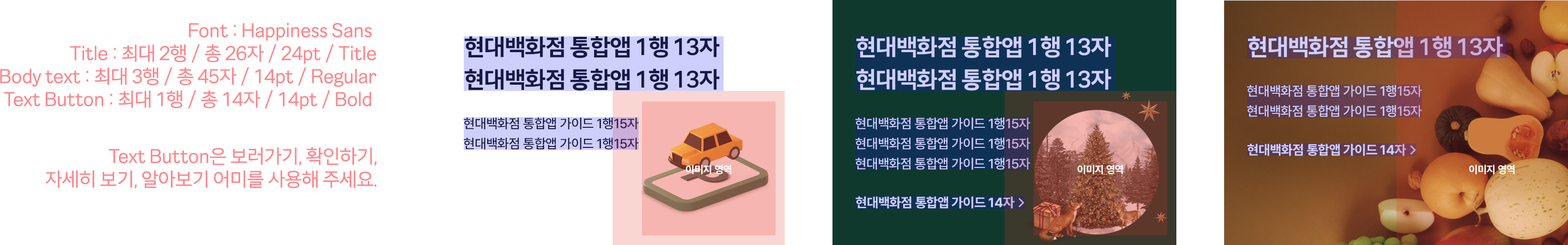
<style>
.page{position:relative;width:1568px;height:245px;background:#ffffff}
.page>*{position:absolute;margin:0}
.t1{font:19.1px/22.9px "Happiness-Sans-Regular";letter-spacing:-0.03em;color:#ff858b}
.t2{font:22.9px/32.5px "HappinessSansVF-Bold";letter-spacing:-0.035em;color:#161845}
.t3{font:22.9px/32.5px "HappinessSansVF-Bold";letter-spacing:-0.035em;color:#cfcffd}
.t4{font:22.9px "HappinessSansVF-Bold";letter-spacing:-0.035em}
.t5{font:13.4px/20.1px "Pretendard-Medium";letter-spacing:-0.02em;color:#cfcffd}
.t6{font:13.4px/20.1px "Pretendard-Medium";letter-spacing:-0.02em;color:#161845}
.t7{font:13.4px "Pretendard-Bold";letter-spacing:-0.02em;color:#cfcffd}
.t8{font:10.5px "Pretendard-Bold";letter-spacing:-0.02em;color:#ffffff}
</style>
<div class="page">
<p class="t1" style="left:0px;top:22px;width:376px;height:87px;text-align:right">Font : Happiness Sans <br>Title : 최대 2행 / 총 26자 / 24pt / Title<br>Body text : 최대 3행 / 총 45자 / 14pt / Regular<br>Text Button : 최대 1행 / 총 14자 / 14pt / Bold</p>
<p class="t2" style="left:465px;top:36px;width:255px;height:55px">현대백화점 통합앱 1행 13자<br>현대백화점 통합앱 1행 13자</p>
<p class="t3" style="left:856px;top:36px;width:255px;height:55px">현대백화점 통합앱 1행 13자<br>현대백화점 통합앱 1행 13자</p>
<p class="t4" style="left:1248px;top:36px;width:255px;height:22px">현대백화점 통합앱 1행 13자</p>
<p class="t5" style="left:1247px;top:85px;width:175px;height:32px">현대백화점 통합앱 가이드 1행15자<br>현대백화점 통합앱 가이드 1행15자</p>
<p class="t6" style="left:464px;top:117px;width:175px;height:32px">현대백화점 통합앱 가이드 1행15자<br>현대백화점 통합앱 가이드 1행15자</p>
<p class="t5" style="left:855px;top:117px;width:175px;height:53px">현대백화점 통합앱 가이드 1행15자<br>현대백화점 통합앱 가이드 1행15자<br>현대백화점 통합앱 가이드 1행15자</p>
<p class="t1" style="left:45px;top:147px;width:332px;height:41px;text-align:right">Text Button은 보러가기, 확인하기,<br>자세히 보기, 알아보기 어미를 사용해 주세요.</p>
<p class="t7" style="left:1247px;top:143px;width:159px;height:13px">현대백화점 통합앱 가이드 14자</p>
<p class="t8" style="left:686px;top:164px;width:45px;height:10px">이미지 영역</p>
<p class="t8" style="left:1077px;top:164px;width:46px;height:10px">이미지 영역</p>
<p class="t8" style="left:1469px;top:164px;width:46px;height:10px">이미지 영역</p>
<p class="t7" style="left:855px;top:196px;width:159px;height:12px">현대백화점 통합앱 가이드 14자</p>
</div>
